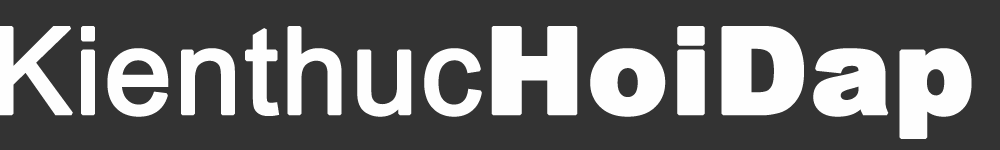
<style>
.page{position:relative;width:1000px;height:150px;background:#333333}
.page>*{position:absolute;margin:0}
.t1{font:120px "ArialMT";color:#fefefe;font-weight:bold}
.t2{font:120px "Arial-Black";color:#fefefe;font-weight:bold}
</style>
<div class="page">
<p class="t1" style="left:0px;top:26px;width:972px;height:113px">Kienthuc<span class="t2">HoiDap</span></p>
</div>
